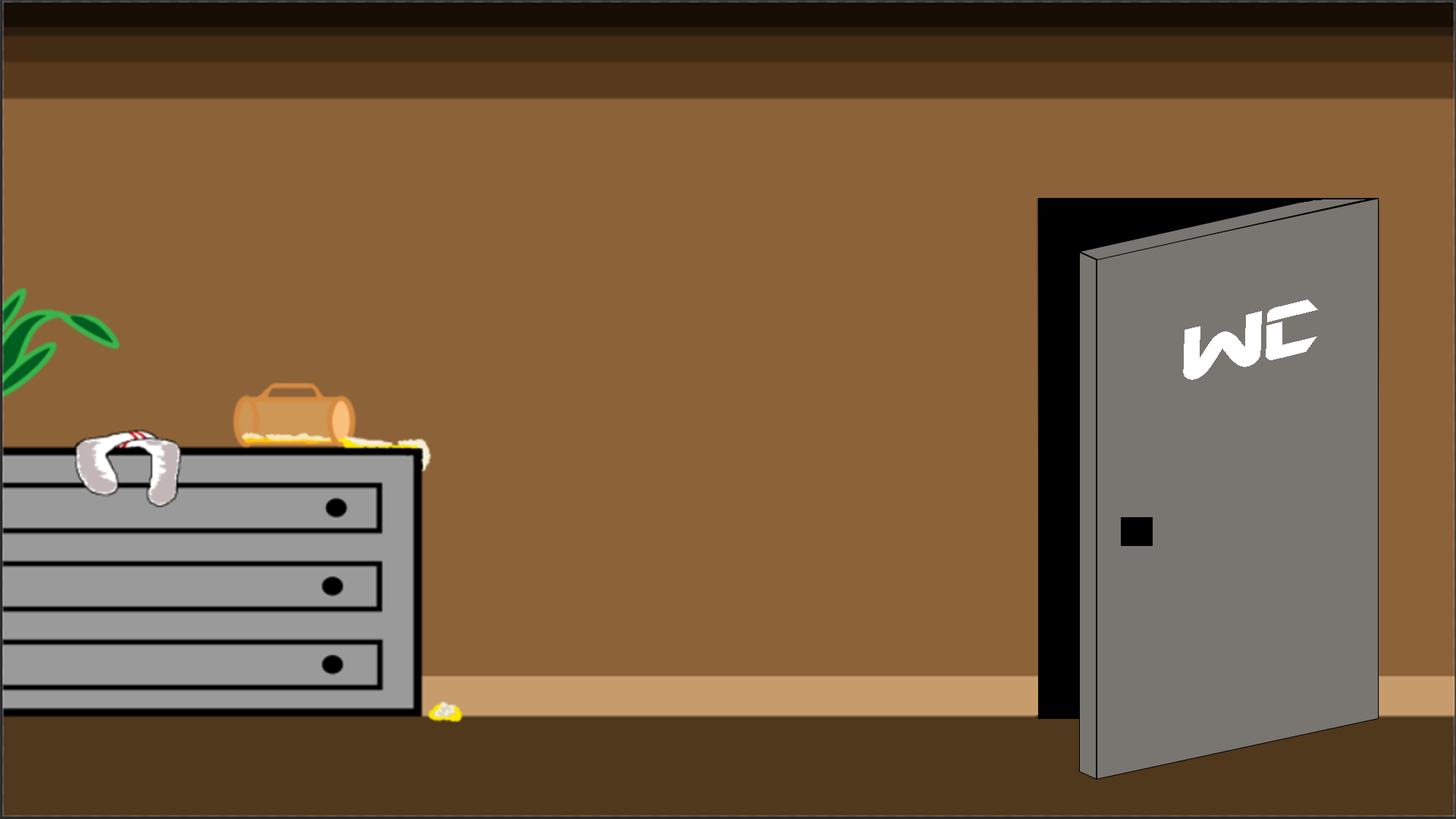
<style>
.page{position:relative;width:1456px;height:819px;background:#8c6239}
.page>*{position:absolute;margin:0}
.t1{font:82.7px "ARDESTINE";color:#ffffff;scale:1.26 1}
</style>
<div class="page">
<p class="t1" style="left:1183px;top:300px;width:135px;height:80px;rotate:-14deg">WC</p>
</div>
